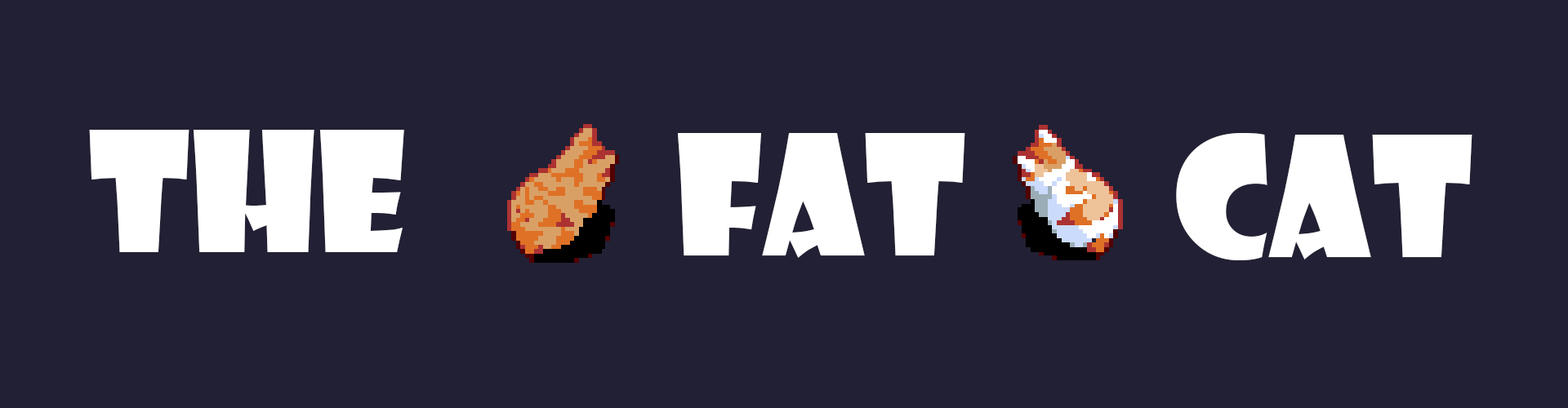
<style>
.page{position:relative;width:1568px;height:408px;background:#222034}
.page>*{position:absolute;margin:0}
.t1{font:163.3px "ShowcardGothic-Reg";color:#ffffff}
</style>
<div class="page">
<p class="t1" style="left:89px;top:130px;width:315px;height:122px">THE</p>
<p class="t1" style="left:677px;top:133px;width:288px;height:125px">FAT</p>
<p class="t1" style="left:1176px;top:133px;width:296px;height:128px">CAT</p>
</div>
